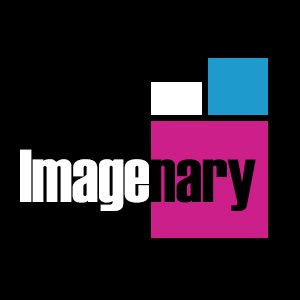
<style>
.page{position:relative;width:300px;height:300px;background:#000000}
.page>*{position:absolute;margin:0}
.t1{font:74.7px "Haettenschweiler";letter-spacing:-0.01em;color:#ffffff}
.t2{font:74.7px "Haettenschweiler";letter-spacing:-0.01em;color:#000000}
</style>
<div class="page">
<p class="t1" style="left:20px;top:149px;width:236px;height:62px">Image<span class="t2">nary</span></p>
</div>
